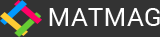
<style>
.page{position:relative;width:160px;height:37px;background:#333333}
.page>*{position:absolute;margin:0}
.t1{font:25.4px "Roboto-Regular";color:#ffffff;scale:1.04 1}
</style>
<div class="page">
<p class="t1" style="left:49px;top:8px;width:111px;height:18px">MATMAG</p>
</div>
